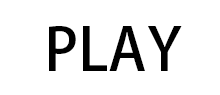
<style>
.page{position:relative;width:220px;height:95px;background:#ffffff}
.page>*{position:absolute;margin:0}
.t1{font:58.3px "AdobeFanHeitiStd-Bold";color:#000000}
</style>
<div class="page">
<p class="t1" style="left:49px;top:26px;width:133px;height:45px">PLAY</p>
</div>
